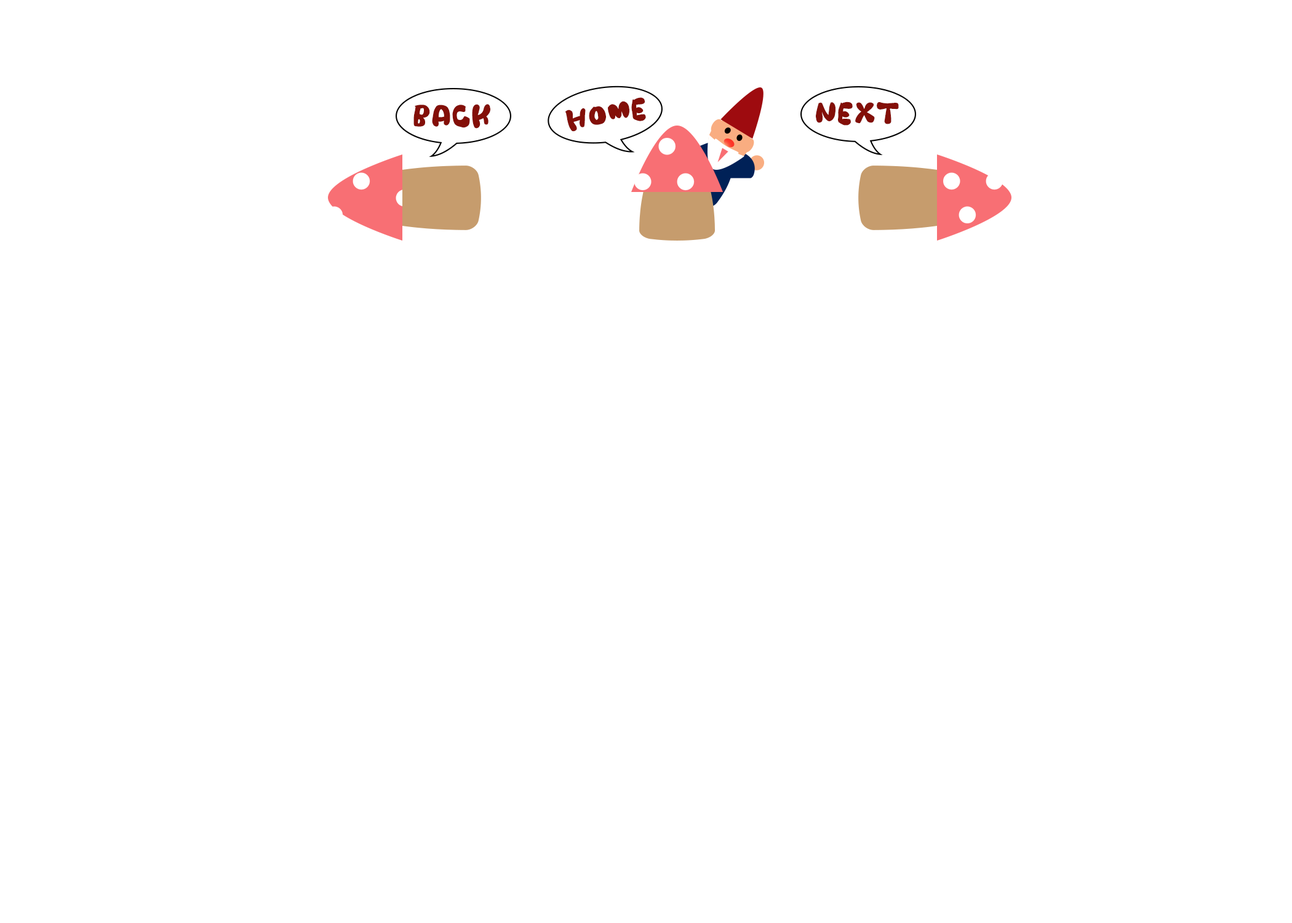
<style>
.page{position:relative;width:1292px;height:923px;background:#ffffff}
.page>*{position:absolute;margin:0}
.t1{font:25.6px "Mikiyu-Font-Mokomor-kuro";color:#830f08;text-transform:uppercase}
</style>
<div class="page">
<p class="t1" style="left:565px;top:97px;width:81px;height:35px;rotate:-10deg">home</p>
<p class="t1" style="left:816px;top:102px;width:83px;height:24px">next</p>
<p class="t1" style="left:413px;top:104px;width:77px;height:25px">back</p>
</div>
